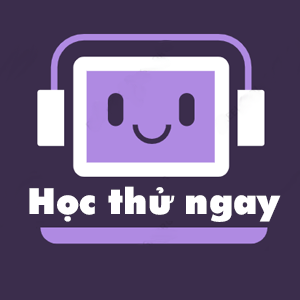
<style>
.page{position:relative;width:300px;height:300px;background:#3b2d4c}
.page>*{position:absolute;margin:0}
.t1{font:36px "UTM-Futura-Extra";color:#ffffff}
</style>
<div class="page">
<p class="t1" style="left:29px;top:186px;width:252px;height:36px">Học thử ngay</p>
</div>
